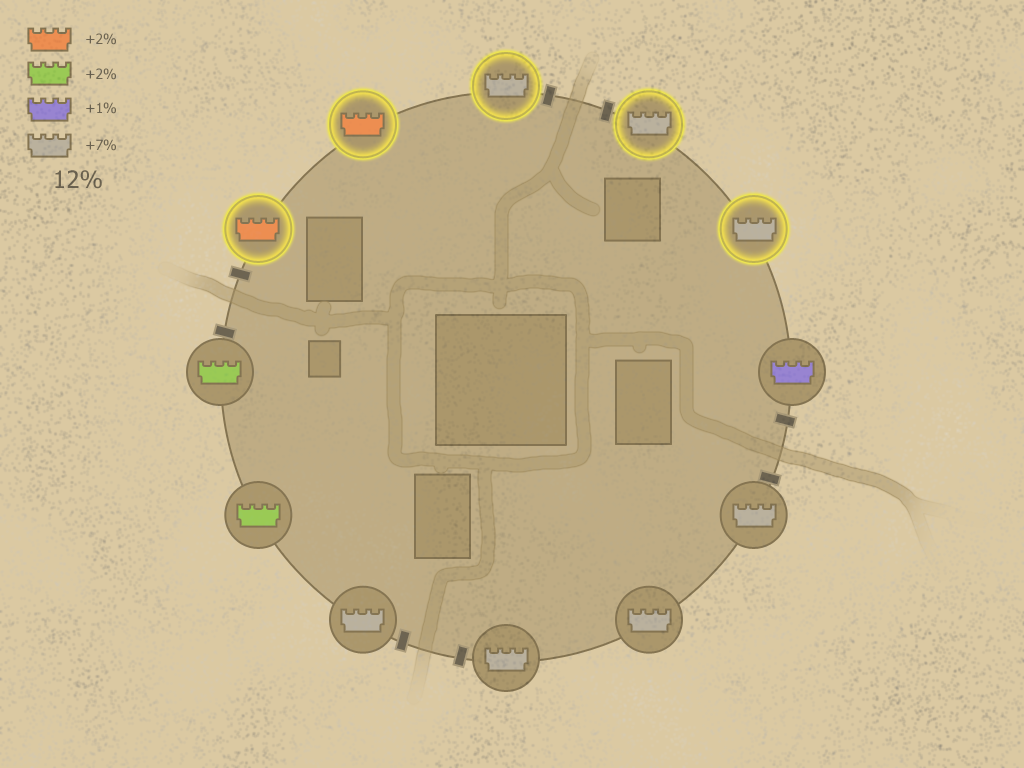
<style>
.page{position:relative;width:1024px;height:768px;background:#dbc9a2}
.page>*{position:absolute;margin:0}
.t1{font:14px "Tahoma";color:#6d6451}
.t2{font:14px "Tahoma";color:#6a6250}
.t3{font:24px "Tahoma";color:#6d6450}
</style>
<div class="page">
<p class="t1" style="left:86px;top:33px;width:30px;height:12px">+2%</p>
<p class="t2" style="left:86px;top:68px;width:30px;height:12px">+2%</p>
<p class="t1" style="left:86px;top:102px;width:30px;height:12px">+1%</p>
<p class="t1" style="left:86px;top:139px;width:30px;height:12px">+7%</p>
<p class="t3" style="left:55px;top:170px;width:47px;height:19px">12%</p>
</div>
